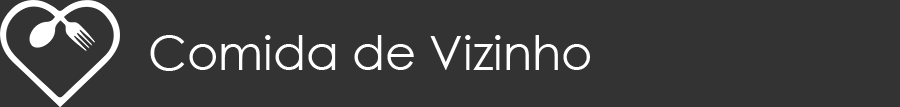
<style>
.page{position:relative;width:900px;height:107px;background:#333333}
.page>*{position:absolute;margin:0}
.t1{font:48px "CenturyGothic";color:#ffffff}
</style>
<div class="page">
<p class="t1" style="left:150px;top:35px;width:440px;height:36px">Comida de Vizinho</p>
</div>
